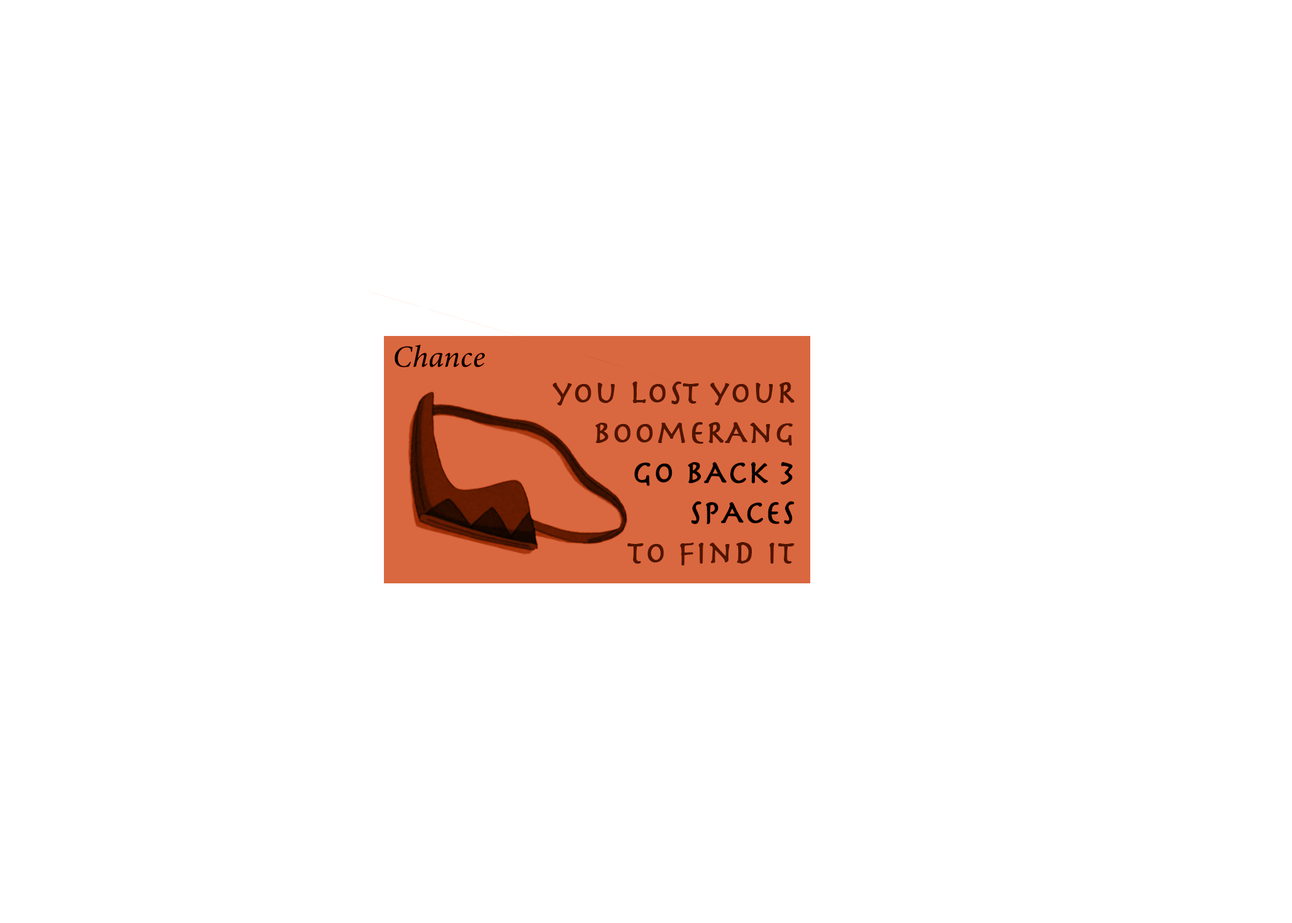
<style>
.page{position:relative;width:1292px;height:923px;background:#ffffff}
.page>*{position:absolute;margin:0}
.t1{font:30.8px "MinionConceptItalic-MediumItalic";color:#000000;font-weight:bold}
.t2{font:33.3px "Herculanum";color:#4e1501;font-weight:bold}
.t3{font:33.3px "Herculanum";color:#000000;font-weight:bold}
</style>
<div class="page">
<p class="t1" style="left:394px;top:345px;width:91px;height:22px">Chance</p>
<p class="t2" style="left:553px;top:381px;width:242px;height:184px;text-align:right">you lost youR<br>boomeRAng<br> <br> <br>to find it</p>
<p class="t3" style="left:634px;top:462px;width:160px;height:62px;text-align:right">go bAck 3<br>spAces</p>
</div>
